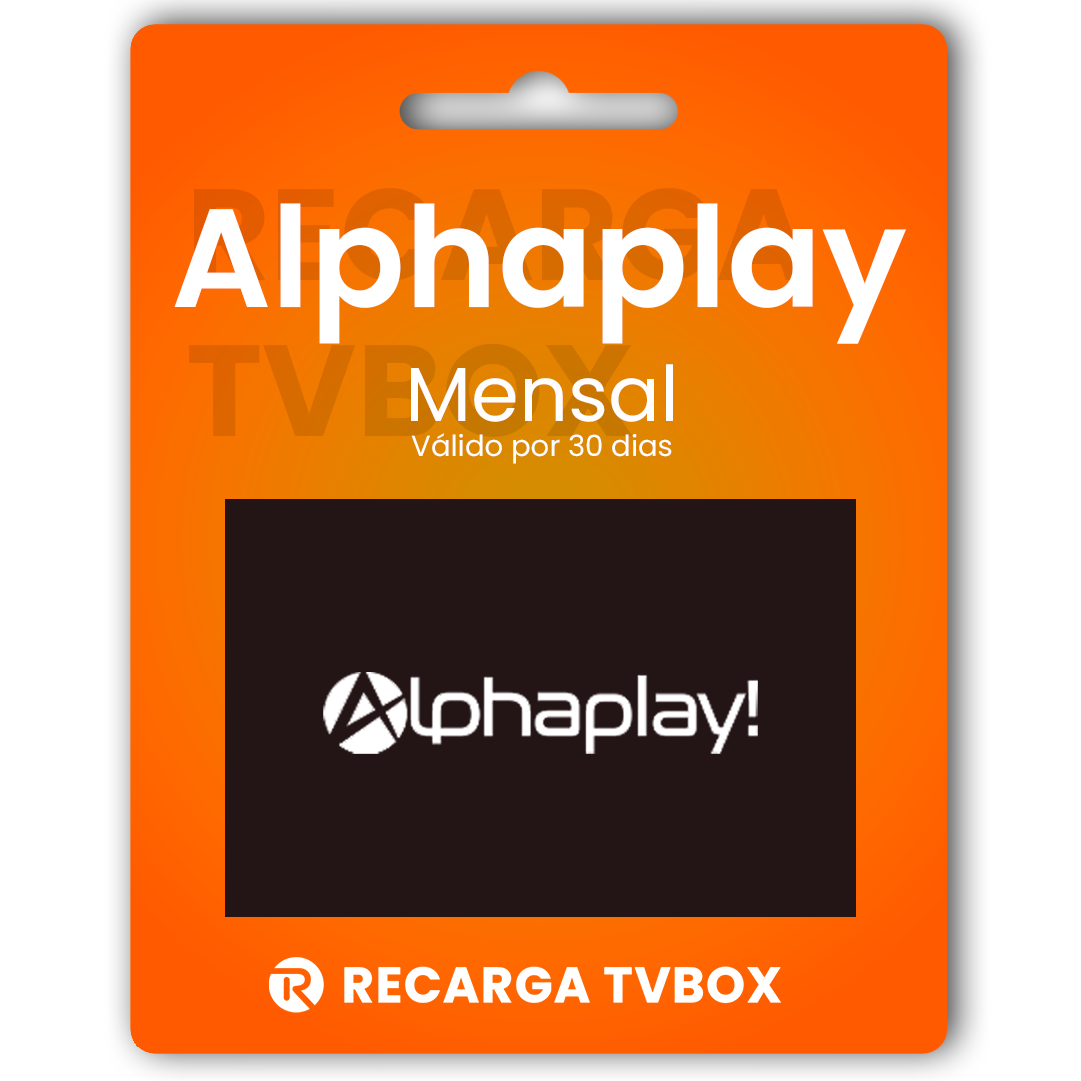
<style>
.page{position:relative;width:1081px;height:1081px;background:#ffffff}
.page>*{position:absolute;margin:0}
.t1{font:129.4px "Poppins-Bold"}
.t2{font:139.9px "Poppins-SemiBold";color:#ffffff}
.t3{font:29.1px "Poppins-Regular";color:#fffefe}
.t4{font:76.7px "Poppins-Regular";color:#fffefe}
</style>
<div class="page">
<p class="t1" style="left:189px;top:188px;width:621px;height:249px">RECARGA<br>TVBOX</p>
<p class="t2" style="left:174px;top:203px;width:732px;height:141px">Alphaplay</p>
<p class="t3" style="left:411px;top:364px;width:262px;height:100px;text-align:center"><span class="t4">Mensal<br></span>Válido por 30 dias</p>
</div>
